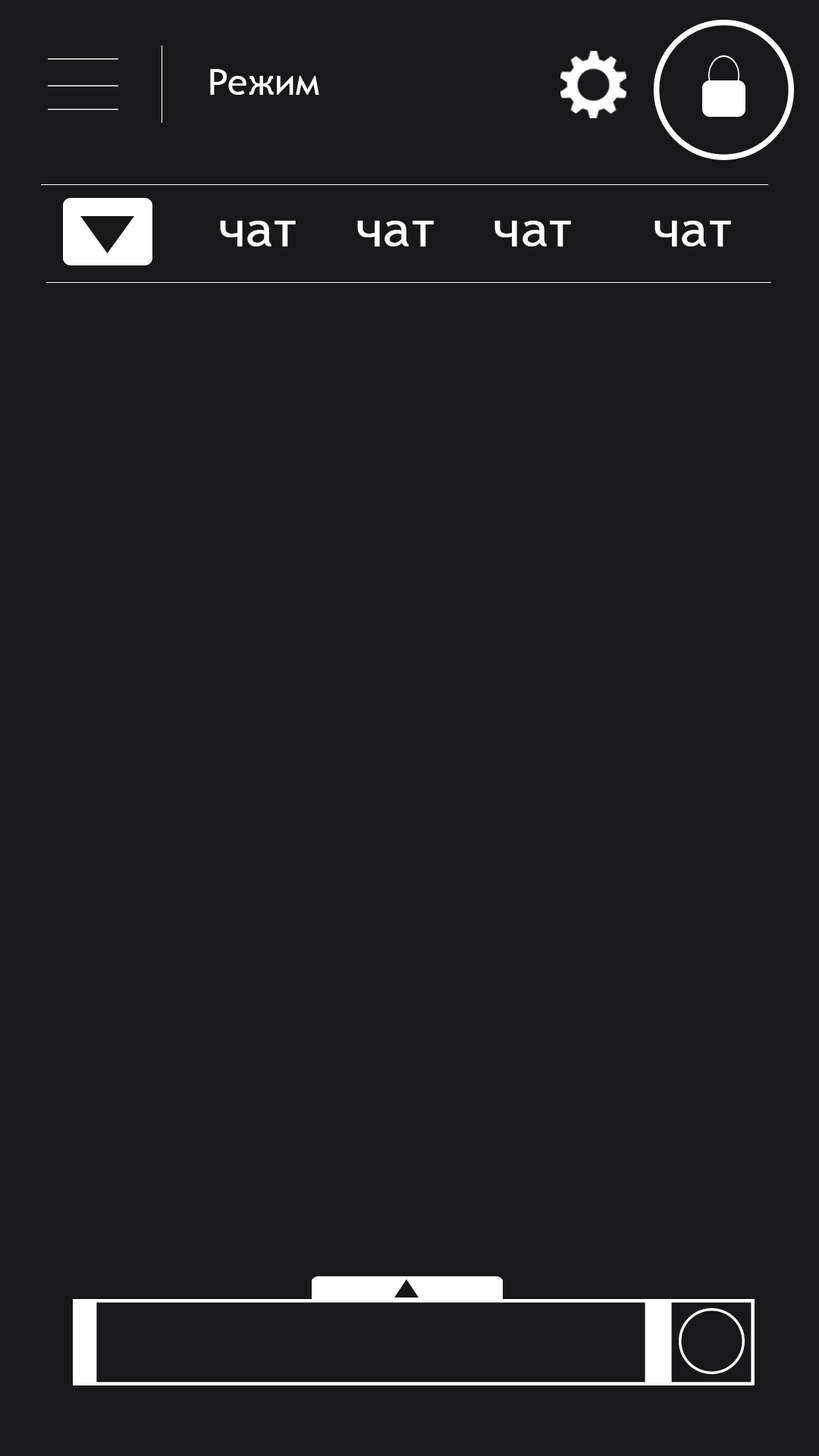
<style>
.page{position:relative;width:819px;height:1456px;background:#18181a}
.page>*{position:absolute;margin:0}
.t1{font:36.4px "TrebuchetMS";color:#ffffff}
.t2{font:49.3px "TrebuchetMS";color:#ffffff;scale:1.08 1}
</style>
<div class="page">
<p class="t1" style="left:210px;top:69px;width:109px;height:26px">Режим</p>
<p class="t2" style="left:220px;top:221px;width:76px;height:25px">чат</p>
<p class="t2" style="left:357px;top:221px;width:77px;height:25px">чат</p>
<p class="t2" style="left:494px;top:221px;width:77px;height:25px">чат</p>
<p class="t2" style="left:654px;top:221px;width:77px;height:25px">чат</p>
</div>
